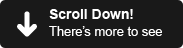
<style>
.page{position:relative;width:183px;height:48px;background:#191919}
.page>*{position:absolute;margin:0}
.t1{font:13px/17px "ArialMT";color:#ffffff}
.t2{font:14px/17px "Arial-BoldMT";color:#ffffff}
</style>
<div class="page">
<p class="t1" style="left:49px;top:9px;width:113px;height:27px"><span class="t2">Scroll Down!<br></span>There’s more to see</p>
</div>
